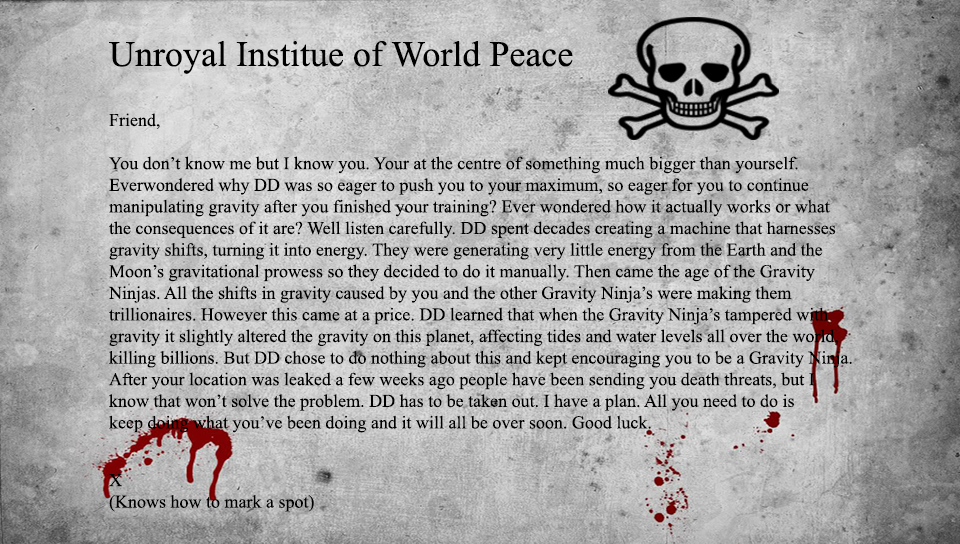
<style>
.page{position:relative;width:960px;height:544px}
.page>*{position:absolute;margin:0}
.t1{font:18px "TimesNewRomanPSMT";color:#000000}
.t2{font:36px "TimesNewRomanPSMT";color:#000000}
</style>
<div class="page">
<p class="t1" style="left:108px;top:41px;width:744px;height:471px;text-align:right"><span class="t2">Unroyal Institue of World Peace<br><br></span><br>Friend,<br><br>You don’t know me but I know you. Your at the centre of something much bigger than yourself. <br>Everwondered why DD was so eager to push you to your maximum, so eager for you to continue<br>manipulating gravity after you finished your training? Ever wondered how it actually works or what<br>the consequences of it are? Well listen carefully. DD spent decades creating a machine that harnesses<br>gravity shifts, turning it into energy. They were generating very little energy from the Earth and the <br>Moon’s gravitational prowess so they decided to do it manually. Then came the age of the Gravity <br>Ninjas. All the shifts in gravity caused by you and the other Gravity Ninja’s were making them <br>trillionaires. However this came at a price. DD learned that when the Gravity Ninja’s tampered with <br>gravity it slightly altered the gravity on this planet, affecting tides and water levels all over the world, <br>killing billions. But DD chose to do nothing about this and kept encouraging you to be a Gravity Ninja. <br>After your location was leaked a few weeks ago people have been sending you death threats, but I <br>know that won’t solve the problem. DD has to be taken out. I have a plan. All you need to do is <br>keep doing what you’ve been doing and it will all be over soon. Good luck.<br><br>X<br>(Knows how to mark a spot)</p>
</div>
